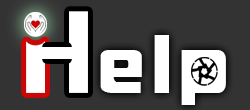
<style>
.page{position:relative;width:250px;height:110px;background:#333333}
.page>*{position:absolute;margin:0}
.t1{font:69.7px "BlackthornsDemo-Black";letter-spacing:0.05em;color:#ffffff;scale:1.04 1}
</style>
<div class="page">
<p class="t1" style="left:100px;top:35px;width:126px;height:70px">elp</p>
</div>
